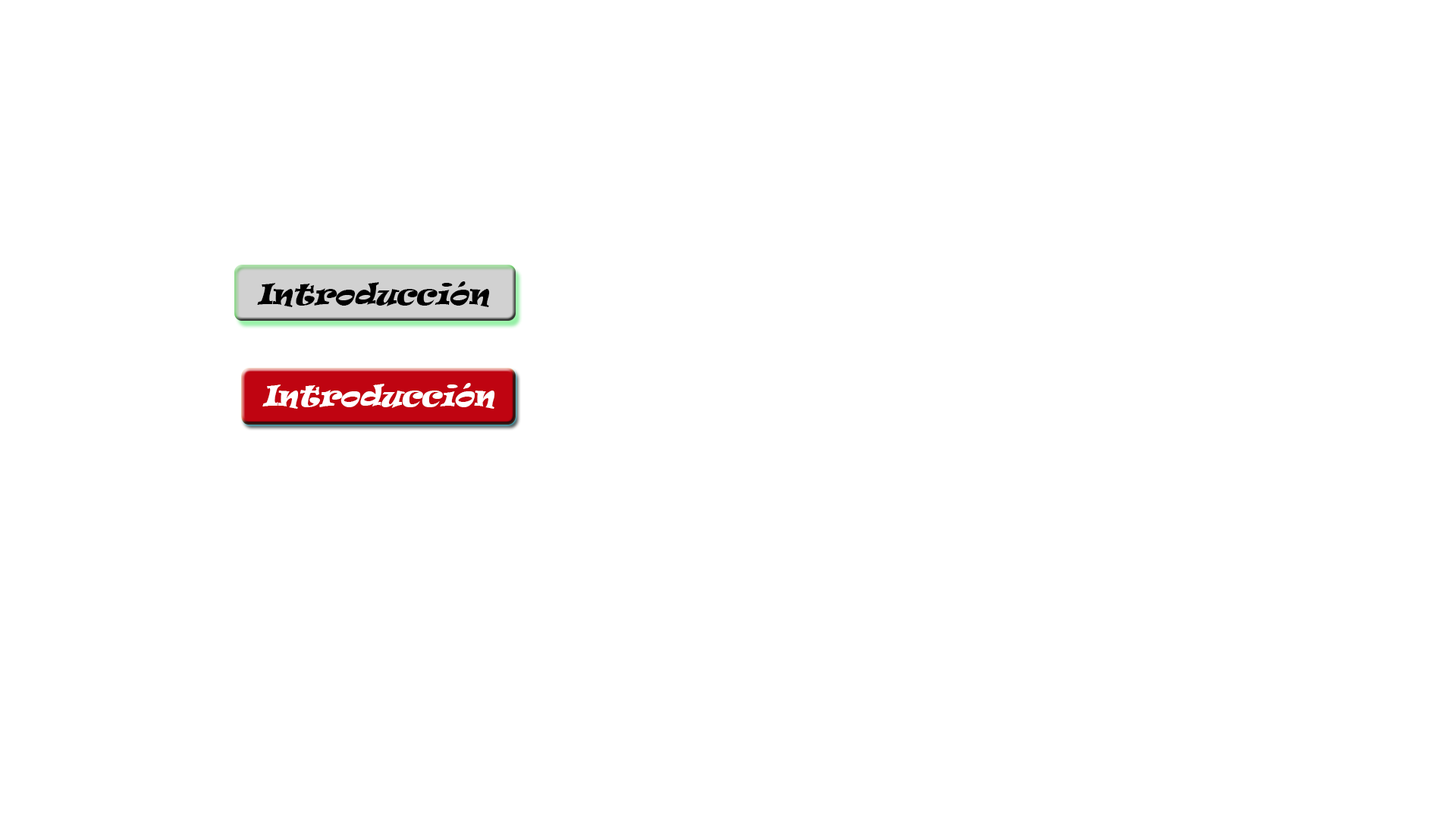
<style>
.page{position:relative;width:1456px;height:819px;background:#ffffff}
.page>*{position:absolute;margin:0}
.t1{font:27.1px "Ravie";color:#000000;font-style:italic}
.t2{font:27.1px "Ravie";color:#ffffff;font-style:italic}
</style>
<div class="page">
<p class="t1" style="left:257px;top:281px;width:233px;height:26px">Introducción</p>
<p class="t2" style="left:262px;top:383px;width:233px;height:26px">Introducción</p>
</div>
